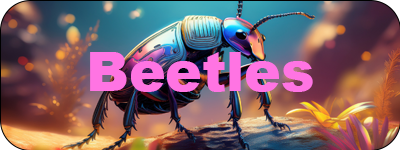
<style>
.page{position:relative;width:400px;height:150px}
.page>*{position:absolute;margin:0}
.t1{font:54.7px "Arial-Black";color:#ff74e3}
</style>
<div class="page">
<p class="t1" style="left:90px;top:52px;width:223px;height:40px">Beetles</p>
</div>
